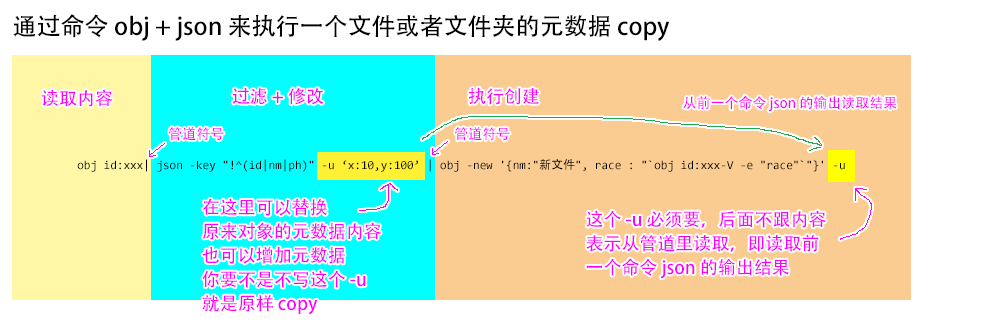
<style>
.page{position:relative;width:1000px;height:329px;background:#ffffff}
.page>*{position:absolute;margin:0}
.t1{font:24px "AdobeHeitiStd-Regular";color:#000000}
.t2{font:18px "AdobeHeitiStd-Regular";color:#ff00ff}
.t3{font:14px "AdobeHeitiStd-Regular";color:#ff00ff}
.t4{font:12px "Consolas";color:#000000}
.t5{font:12px "AdobeHeitiStd-Regular";color:#000000}
.t6{font:18px/24px "AdobeHeitiStd-Regular";color:#ff00ff}
</style>
<div class="page">
<p class="t1" style="left:13px;top:14px;width:657px;height:27px">通过命令 obj + json 来执行一个文件或者文件夹的元数据 copy</p>
<p class="t2" style="left:41px;top:89px;width:72px;height:18px">读取内容</p>
<p class="t2" style="left:232px;top:87px;width:92px;height:18px">过滤 + 修改</p>
<p class="t2" style="left:468px;top:87px;width:71px;height:18px">执行创建</p>
<p class="t3" style="left:683px;top:95px;width:214px;height:17px">从前一个命令 json 的输出读取结果</p>
<p class="t3" style="left:169px;top:127px;width:55px;height:14px">管道符号</p>
<p class="t3" style="left:455px;top:127px;width:55px;height:14px">管道符号</p>
<p class="t4" style="left:77px;top:159px;width:768px;height:13px">obj id:xxx| json -key "!^(id|nm|ph)" -u ‘x:10,y:100’ | obj -new '{nm:"<span class="t5">新文件</span>", race : "`obj id:xxx-V -e "race"`"}' -u</p>
<p class="t6" style="left:202px;top:198px;width:179px;height:117px">在这里可以替换<br>原来对象的元数据内容<br>也可以增加元数据<br>你要不是不写这个 -u<br>就是原样 copy</p>
<p class="t6" style="left:586px;top:210px;width:240px;height:69px">这个 -u 必须要，后面不跟内容<br>表示从管道里读取，即读取前<br>一个命令 json 的输出结果</p>
</div>
